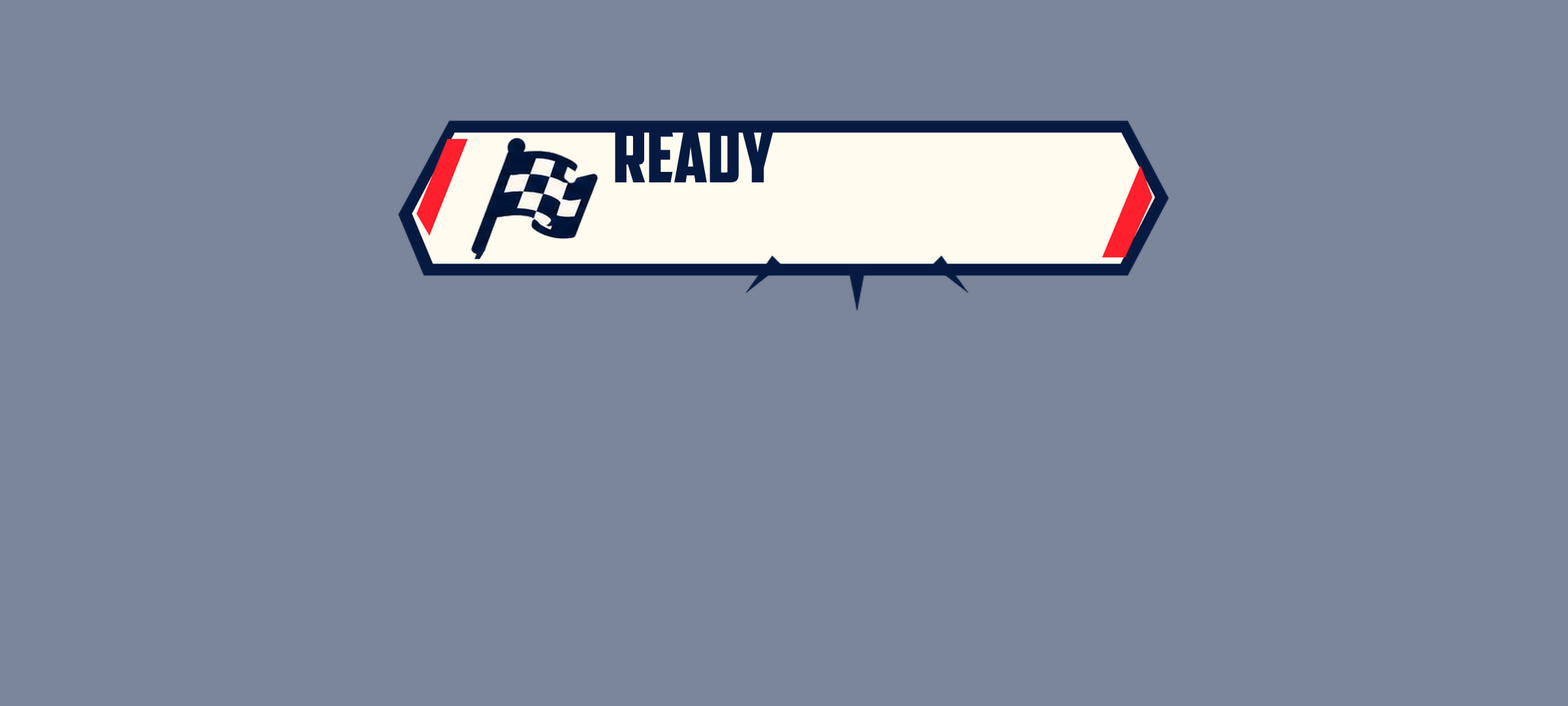
<style>
.page{position:relative;width:1568px;height:706px;background:#7b869a}
.page>*{position:absolute;margin:0}
.t1{font:77.5px "AmericanCaptain";color:#061a41}
</style>
<div class="page">
<p class="t1" style="left:615px;top:126px;width:160px;height:56px">READY</p>
</div>
